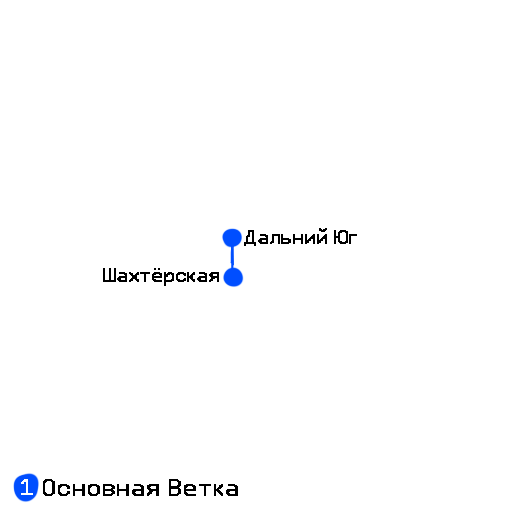
<style>
.page{position:relative;width:512px;height:512px;background:#ffffff}
.page>*{position:absolute;margin:0}
.t1{font:17.6px "MultiCraft-Font";color:#000000}
.t2{font:20.1px "MultiCraft-Font";color:#ffffff}
.t3{font:22.3px "MultiCraft-Font";color:#000000}
</style>
<div class="page">
<p class="t1" style="left:244px;top:228px;width:113px;height:18px">Дальний Юг</p>
<p class="t1" style="left:103px;top:268px;width:116px;height:18px">Шахтёрская</p>
<p class="t2" style="left:21px;top:479px;width:12px;height:16px">1</p>
<p class="t3" style="left:43px;top:479px;width:195px;height:17px">Основная Ветка</p>
</div>
